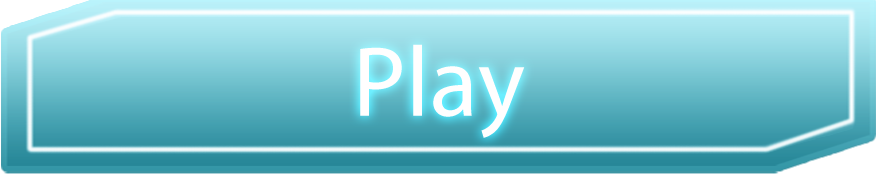
<style>
.page{position:relative;width:877px;height:176px}
.page>*{position:absolute;margin:0}
.t1{font:100px "MyriadPro-Regular";color:#fffefe}
</style>
<div class="page">
<p class="t1" style="left:360px;top:45px;width:165px;height:94px">Play</p>
<p class="t1" style="left:360px;top:44px;width:165px;height:94px">Play</p>
</div>
